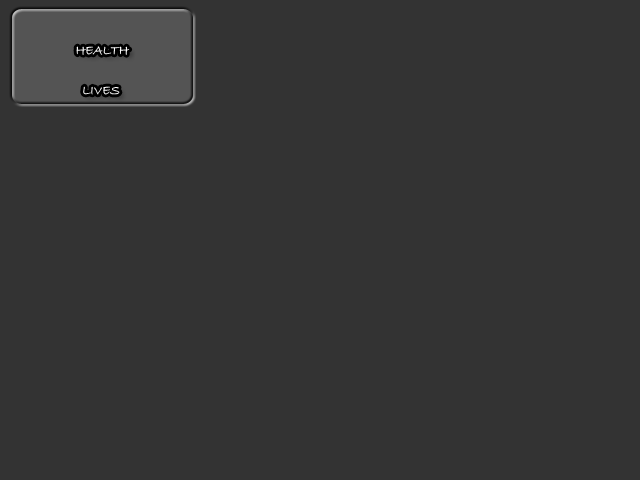
<style>
.page{position:relative;width:640px;height:480px;background:#333333}
.page>*{position:absolute;margin:0}
.t1{font:13.3px "BradleyHandITC";color:#ffffff}
</style>
<div class="page">
<p class="t1" style="left:76px;top:46px;width:54px;height:9px">HEALTH</p>
<p class="t1" style="left:83px;top:86px;width:37px;height:9px">LIVES</p>
</div>
